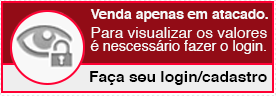
<style>
.page{position:relative;width:276px;height:96px;background:#920c16}
.page>*{position:absolute;margin:0}
.t1{font:14.5px/13px "Helvetica";color:#f8f8f8}
.t2{font:14px "Helvetica-Bold";color:#f8f8f8}
.t3{font:15.5px/19px "Helvetica";color:#f8f8f8}
.t4{font:15.6px "Helvetica-Bold";color:#000000}
</style>
<div class="page">
<p class="t1" style="left:90px;top:9px;width:178px;height:45px;text-align:justify"><span class="t2">Venda apenas em atacado.<br></span><span class="t3">Para visualizar os valores<br></span>é nescessário fazer o login.</p>
<p class="t4" style="left:90px;top:71px;width:177px;height:14px">Faça seu login/cadastro</p>
</div>
